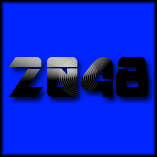
<style>
.page{position:relative;width:157px;height:157px;background:#0024ff}
.page>*{position:absolute;margin:0}
.t1{font:64px "ARDESTINE";color:#000000}
</style>
<div class="page">
<p class="t1" style="left:9px;top:57px;width:140px;height:40px">2048</p>
</div>
